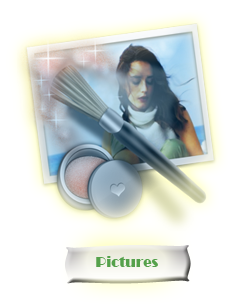
<style>
.page{position:relative;width:235px;height:305px;background:#ffffff}
.page>*{position:absolute;margin:0}
.t1{font:14px "Broadway";color:#55a14b}
</style>
<div class="page">
<p class="t1" style="left:96px;top:256px;width:62px;height:11px">Pictures</p>
</div>
